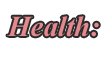
<style>
.page{position:relative;width:110px;height:60px;background:#ffffff}
.page>*{position:absolute;margin:0}
.t1{font:29px "TimesNewRomanPS-BoldItalicMT";color:#e3888c}
</style>
<div class="page">
<p class="t1" style="left:7px;top:16px;width:92px;height:21px">Health:</p>
</div>
